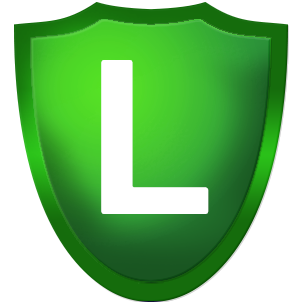
<style>
.page{position:relative;width:302px;height:302px;background:#ffffff}
.page>*{position:absolute;margin:0}
.t1{font:220px "Barlow-Bold";color:#ffffff}
</style>
<div class="page">
<p class="t1" style="left:101px;top:60px;width:108px;height:154px">L</p>
</div>
